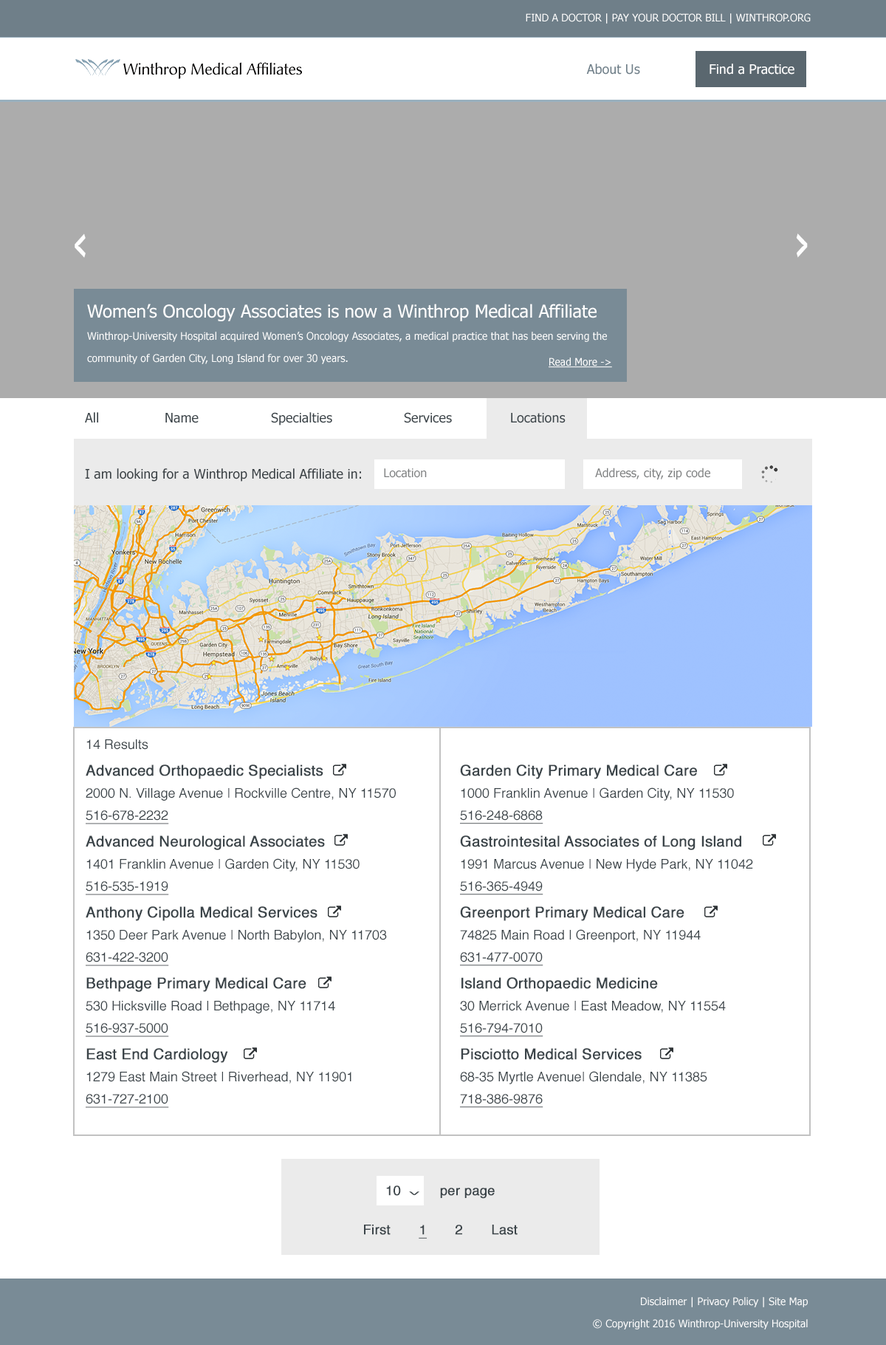
<style>
.page{position:relative;width:886px;height:1345px;background:#ffffff}
.page>*{position:absolute;margin:0}
.t1{font:10.3px "Tahoma";color:#ffffff;text-transform:uppercase}
.t2{font:44.3px "PTSans-CaptionBold";color:#fefefe;scale:0.5 1}
.t3{font:10.3px/22.2px "Tahoma";color:#ffffff}
.t4{font:17.7px/22.2px "Tahoma";color:#ffffff}
.t5{font:10.3px "Tahoma";color:#ffffff;text-decoration:underline}
.t6{font:13.3px "Tahoma";color:#3b4449}
.t7{font:13.3px "Tahoma";color:#394044}
.t8{font:11.8px "Tahoma";color:#7d7f80}
.t9{font:13.3px/22.2px "Helvetica";color:#3b4449}
.t10{font:14.8px/26.6px "Helvetica";color:#3b4449;font-weight:bold}
.t11{font:13.3px/22.2px "Helvetica";color:#3b4449;text-decoration:underline}
.t12{font:13.3px "Helvetica";color:#3b4449;font-weight:bold}
.t13{font:6.3px "Tahoma";color:#3b4449;scale:3.38 1}
.t14{font:13.3px "Helvetica";color:#3b4449;font-weight:bold;text-decoration:underline}
</style>
<div class="page">
<p class="t1" style="left:526px;top:13px;width:285px;height:11px">Find a doctor | Pay Your Doctor Bill | winthrop.org</p>
<p class="t2" style="left:75px;top:233px;width:733px;height:25px">&lt;                           &gt;</p>
<p class="t3" style="left:87px;top:304px;width:520px;height:60px"><span class="t4">Women’s Oncology Associates is now a Winthrop Medical Affiliate<br></span>Winthrop-University Hospital acquired Women’s Oncology Associates, a medical practice that has been serving the community of Garden City, Long Island for over 30 years.</p>
<p class="t5" style="left:549px;top:358px;width:63px;height:10px">Read More -&gt;</p>
<p class="t6" style="left:85px;top:412px;width:481px;height:13px">All    Name    Specialties    Services    Locations</p>
<p class="t7" style="left:85px;top:468px;width:276px;height:14px">I am looking for a Winthrop Medical Affiliate in:</p>
<p class="t8" style="left:384px;top:468px;width:43px;height:10px">Location</p>
<p class="t8" style="left:595px;top:468px;width:116px;height:12px">Address, city, zip code</p>
<p class="t9" style="left:86px;top:739px;width:310px;height:369px">14 Results<br><span class="t10">Advanced Orthopaedic Specialists <br></span>2000 N. Village Avenue | Rockville Centre, NY 11570<br><span class="t11">516-678-2232<br></span><span class="t10">Advanced Neurological Associates<br></span>1401 Franklin Avenue | Garden City, NY 11530<br><span class="t11">516-535-1919<br></span><span class="t10">Anthony Cipolla Medical Services<br></span>1350 Deer Park Avenue | North Babylon, NY 11703<br><span class="t11">631-422-3200<br></span><span class="t10">Bethpage Primary Medical Care<br></span>530 Hicksville Road | Bethpage, NY 11714<br><span class="t11">516-937-5000<br></span><span class="t10">East End Cardiology<br></span>1279 East Main Street | Riverhead, NY 11901<br><span class="t11">631-727-2100</span></p>
<p class="t9" style="left:460px;top:765px;width:293px;height:343px"><span class="t10">Garden City Primary Medical Care<br></span>1000 Franklin Avenue | Garden City, NY 11530<br><span class="t11">516-248-6868<br></span><span class="t10">Gastrointesital Associates of Long Island<br></span>1991 Marcus Avenue | New Hyde Park, NY 11042<br><span class="t11">516-365-4949<br></span><span class="t10">Greenport Primary Medical Care<br></span>74825 Main Road | Greenport, NY 11944<br><span class="t11">631-477-0070<br></span><span class="t10">Island Orthopaedic Medicine<br></span>30 Merrick Avenue | East Meadow, NY 11554<br><span class="t11">516-794-7010<br></span><span class="t10">Pisciotto Medical Services<br></span>68-35 Myrtle Avenue| Glendale, NY 11385<br><span class="t11">718-386-9876</span></p>
<p class="t12" style="left:386px;top:1186px;width:109px;height:13px">10  <span class="t13">v</span>     per page</p>
<p class="t12" style="left:364px;top:1225px;width:154px;height:14px">First       <span class="t14">1</span>       2       Last</p>
<p class="t3" style="left:593px;top:1297px;width:215px;height:33px;text-align:right">Disclaimer | Privacy Policy | Site Map<br>© Copyright 2016 Winthrop-University Hospital</p>
</div>
